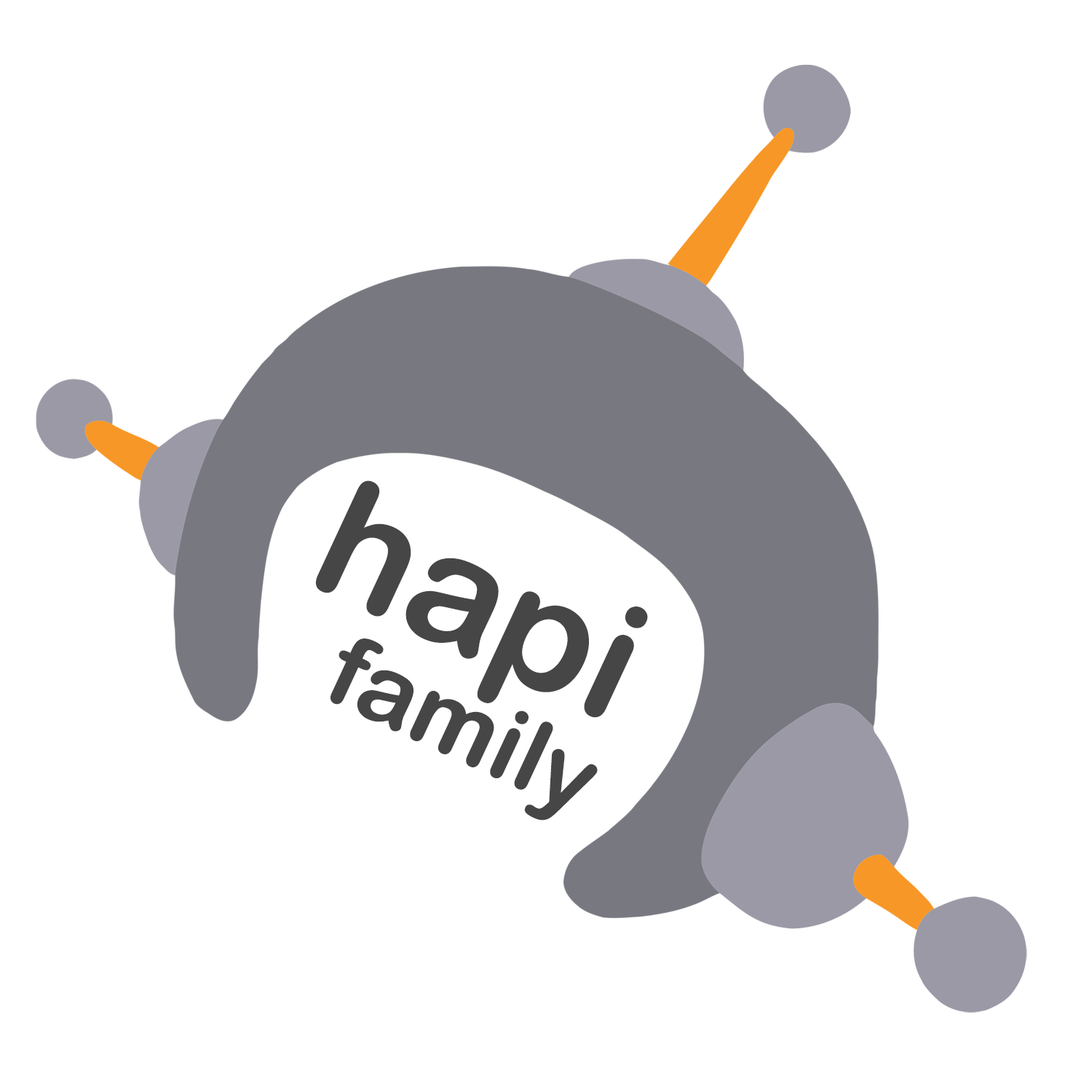
<style>
.page{position:relative;width:1092px;height:1092px;background:#ffffff}
.page>*{position:absolute;margin:0}
.t1{font:163.1px "ArialRoundedMTBold";color:#464646}
.t2{font:99px "ArialRoundedMTBold";color:#464646}
</style>
<div class="page">
<p class="t1" style="left:315px;top:480px;width:333px;height:238px;rotate:25deg">hapi</p>
<p class="t2" style="left:330px;top:638px;width:268px;height:182px;rotate:25deg">family</p>
</div>
